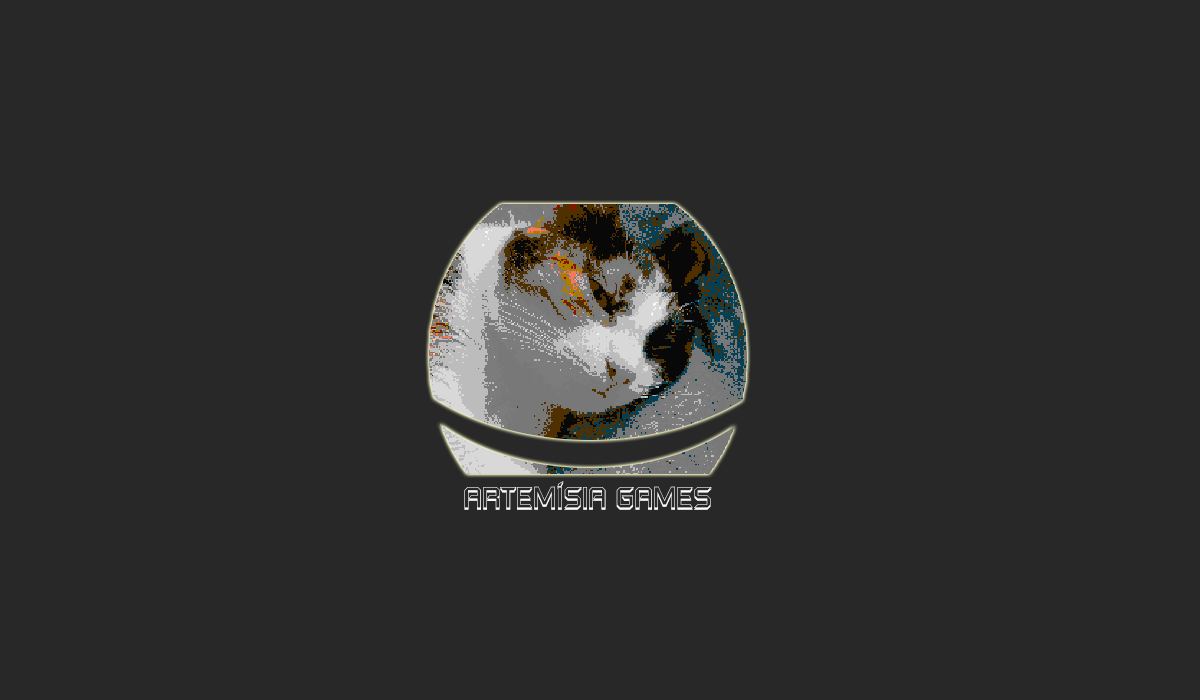
<style>
.page{position:relative;width:1200px;height:700px;background:#282828}
.page>*{position:absolute;margin:0}
.t1{font:33.3px "ControlFreakOffset";color:#ffffff}
</style>
<div class="page">
<p class="t1" style="left:464px;top:481px;width:248px;height:29px">ARTEMÍSIA GAMES</p>
</div>
